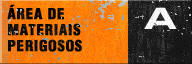
<style>
.page{position:relative;width:192px;height:64px}
.page>*{position:absolute;margin:0}
.t1{font:14.8px/15.8px "HelveticaLT-Condensed-Black";letter-spacing:0.04em;color:#000000;font-weight:bold}
</style>
<div class="page">
<p class="t1" style="left:7px;top:4px;width:75px;height:48px">ÁREA DE<br>MATERIAIS<br>PERIGOSOS</p>
</div>
